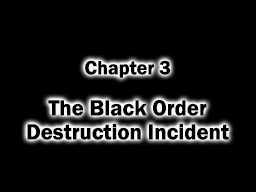
<style>
.page{position:relative;width:256px;height:192px;background:#000000}
.page>*{position:absolute;margin:0}
.t1{font:20px "FranklinGothic-Demi";color:#000000}
.t2{font:20px "FranklinGothic-Demi";color:#000000;text-transform:uppercase}
.t3{font:22.7px/24px "FranklinGothic-Demi";color:#000000}
</style>
<div class="page">
<p class="t1" style="left:85px;top:60px;width:86px;height:18px"><span class="t2">C</span>hapter 3</p>
<p class="t3" style="left:27px;top:100px;width:202px;height:40px;text-align:center">The Black Order<br>Destruction Incident</p>
</div>
